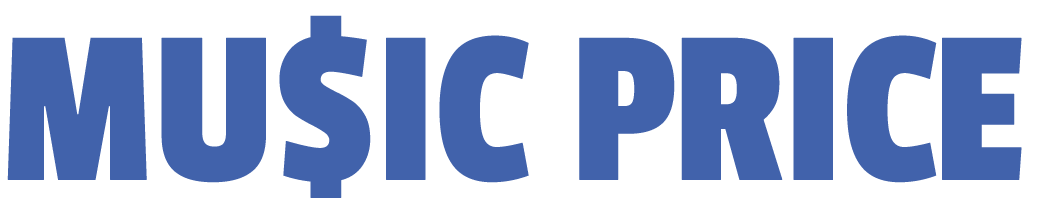
<style>
.page{position:relative;width:1039px;height:214px;background:#ffffff}
.page>*{position:absolute;margin:0}
.t1{font:227.6px "PassionOne-Regular";letter-spacing:-0.04em;color:#4162ab;font-weight:bold}
</style>
<div class="page">
<p class="t1" style="left:7px;top:15px;width:1015px;height:183px">MU$IC PRICE</p>
</div>
